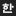
<style>
.page{position:relative;width:16px;height:16px;background:#222222}
.page>*{position:absolute;margin:0}
.t1{font:12px "EBSHunminjeongeumSB";color:#ffffff}
</style>
<div class="page">
<p class="t1" style="left:2px;top:3px;width:12px;height:10px">한</p>
</div>
